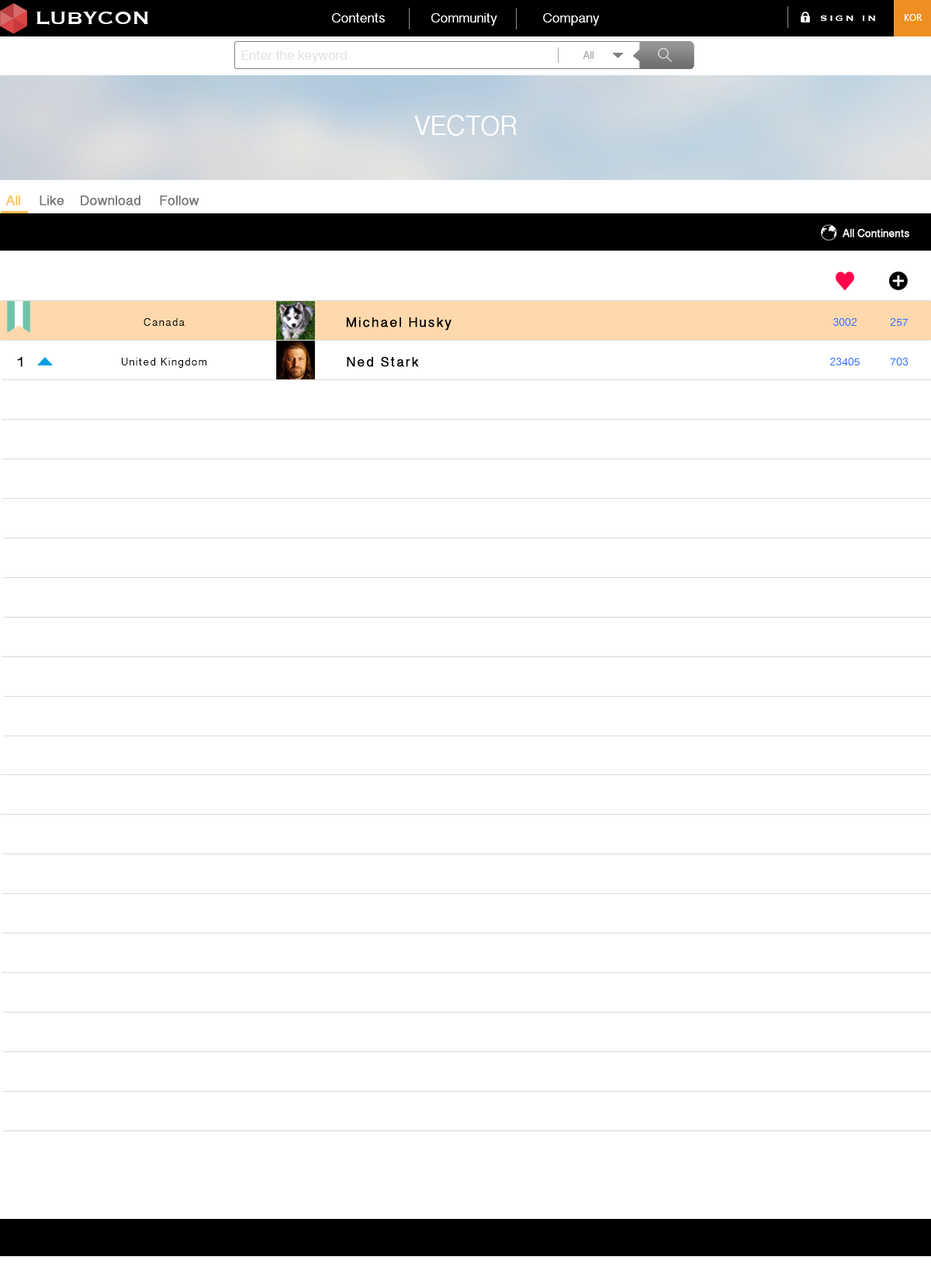
<style>
.page{position:relative;width:931px;height:1281px;background:#ffffff}
.page>*{position:absolute;margin:0}
.t1{font:23.3px "Copperplate";color:#ffffff}
.t2{font:14px "TamilSangamMN";color:#ffffff}
.t3{font:10.9px "Copperplate";letter-spacing:0.2em;color:#ffffff}
.t4{font:9.3px "LaoUI";color:#ffffff}
.t5{font:14px "TamilSangamMN";color:#dfdfdf}
.t6{font:10.9px "TamilSangamMN";color:#a1a1a1}
.t7{font:27.9px "TamilSangamMN";color:#ffffff}
.t8{font:14px "TamilSangamMN";color:#ffbe54;font-weight:bold}
.t9{font:14px "TamilSangamMN";color:#787878;font-weight:bold}
.t10{font:10.9px "TamilSangamMN";color:#f2f2f2;font-weight:bold}
.t11{font:14px "TamilSangamMN";letter-spacing:0.1em;color:#000000;font-weight:bold}
.t12{font:10.9px "TamilSangamMN";letter-spacing:0.1em;color:#000000}
.t13{font:10.9px "TamilSangamMN";color:#2f6fff}
</style>
<div class="page">
<p class="t1" style="left:36px;top:12px;width:112px;height:13px">LUBYCON</p>
<p class="t2" style="left:332px;top:13px;width:53px;height:9px">Contents</p>
<p class="t2" style="left:431px;top:13px;width:66px;height:13px">Community</p>
<p class="t2" style="left:543px;top:13px;width:57px;height:13px">Company</p>
<p class="t3" style="left:821px;top:16px;width:54px;height:5px">SIGN IN</p>
<p class="t4" style="left:905px;top:14px;width:17px;height:7px">KOR</p>
<p class="t5" style="left:241px;top:50px;width:106px;height:13px">Enter the keyword</p>
<p class="t6" style="left:583px;top:51px;width:10px;height:8px">All</p>
<p class="t7" style="left:414px;top:115px;width:103px;height:21px">VECTOR</p>
<p class="t8" style="left:5px;top:196px;width:15px;height:10px">All</p>
<p class="t9" style="left:40px;top:196px;width:24px;height:10px">Like</p>
<p class="t9" style="left:81px;top:196px;width:59px;height:10px">Download</p>
<p class="t9" style="left:160px;top:196px;width:39px;height:10px">Follow</p>
<p class="t10" style="left:843px;top:229px;width:66px;height:8px">All Continents</p>
<p class="t11" style="left:346px;top:317px;width:106px;height:13px">Michael Husky</p>
<p class="t12" style="left:144px;top:318px;width:41px;height:8px">Canada</p>
<p class="t13" style="left:833px;top:318px;width:24px;height:8px">3002</p>
<p class="t13" style="left:890px;top:318px;width:18px;height:8px">257</p>
<p class="t11" style="left:17px;top:357px;width:5px;height:10px">1</p>
<p class="t12" style="left:122px;top:358px;width:85px;height:10px">United Kingdom</p>
<p class="t11" style="left:347px;top:357px;width:72px;height:10px">Ned Stark</p>
<p class="t13" style="left:830px;top:358px;width:30px;height:7px">23405</p>
<p class="t13" style="left:890px;top:358px;width:18px;height:7px">703</p>
</div>
